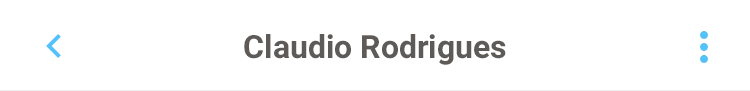
<style>
.page{position:relative;width:750px;height:91px;background:#ffffff}
.page>*{position:absolute;margin:0}
.t1{font:32px "Roboto-Bold";color:#5d5a58}
</style>
<div class="page">
<p class="t1" style="left:244px;top:34px;width:262px;height:31px">Claudio Rodrigues</p>
</div>
